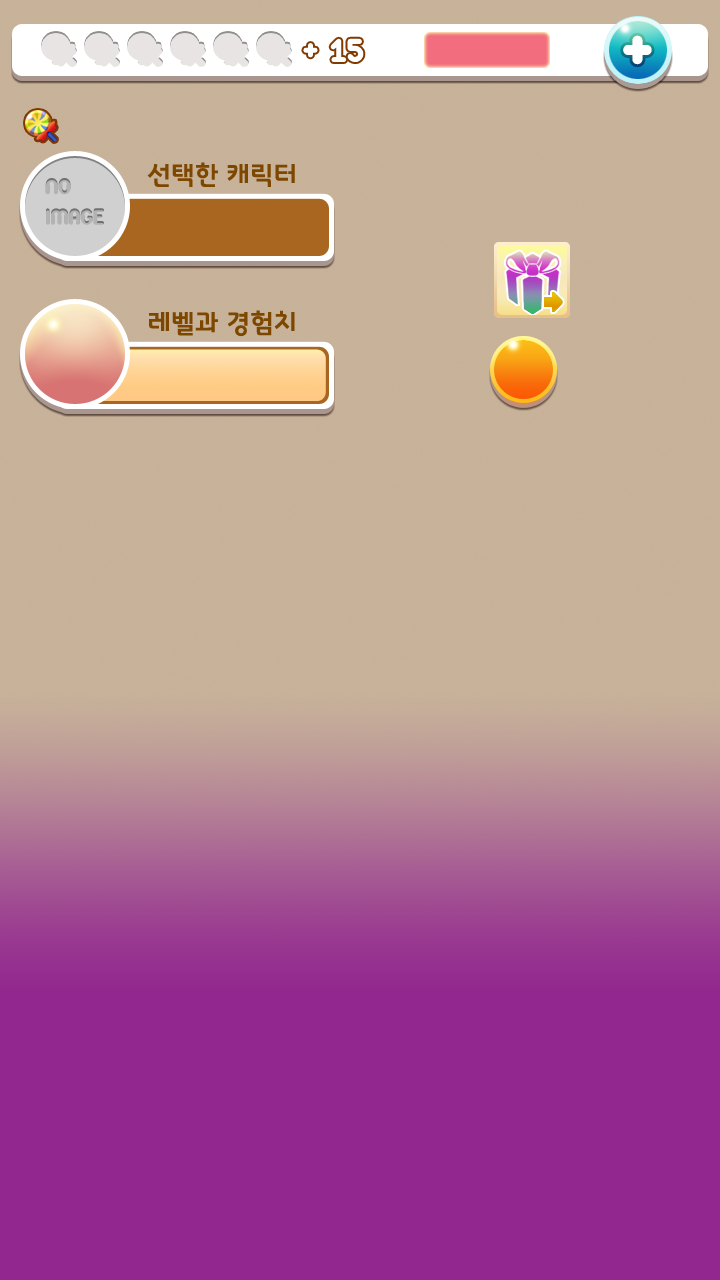
<style>
.page{position:relative;width:720px;height:1280px;background:#92278f}
.page>*{position:absolute;margin:0}
.t1{font:36px "Arista";color:#ffffff}
.t2{font:72px "Arista";color:#ffffff}
.t3{font:25.6px "InterGTB";color:#7e4700}
.t4{font:25.3px "Arista";color:#b3b3b3}
</style>
<div class="page">
<p class="t1" style="left:330px;top:38px;width:34px;height:24px">15</p>
<p class="t2" style="left:623px;top:35px;width:29px;height:30px">+</p>
<p class="t1" style="left:303px;top:43px;width:15px;height:15px">+</p>
<p class="t3" style="left:147px;top:162px;width:148px;height:25px">선택한 캐릭터</p>
<p class="t4" style="left:45px;top:178px;width:59px;height:47px">NO<br>IMAGE</p>
<p class="t3" style="left:149px;top:310px;width:146px;height:27px">레벨과 경험치</p>
</div>
